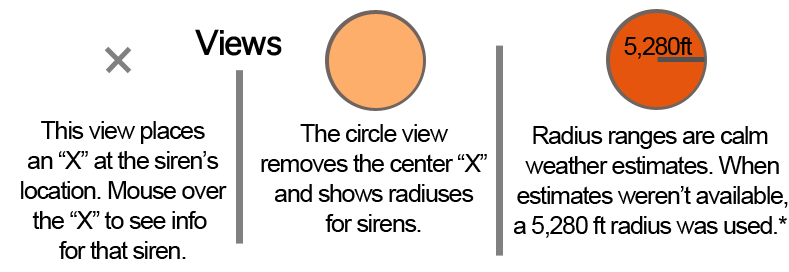
<style>
.page{position:relative;width:789px;height:272px;background:#ffffff}
.page>*{position:absolute;margin:0}
.t1{font:33.3px "Thonburi-Bold";letter-spacing:-0.05em;color:#000000}
.t2{font:25px "ArialMT";letter-spacing:-0.05em;color:#000000}
</style>
<div class="page">
<p class="t1" style="left:195px;top:29px;width:87px;height:27px">Views</p>
<p class="t2" style="left:624px;top:37px;width:69px;height:22px">5,280ft</p>
<p class="t2" style="left:21px;top:121px;width:206px;height:138px;text-align:center">This view places<br>an “X” at the siren’s<br>location. Mouse over<br>the “X” to see info <br>for that siren.</p>
<p class="t2" style="left:261px;top:124px;width:226px;height:108px;text-align:center">The circle view<br>removes the center “X”<br>and shows radiuses<br>for sirens.</p>
<p class="t2" style="left:514px;top:126px;width:274px;height:112px;text-align:center">Radius ranges are calm <br>weather estimates. When<br>estimates weren’t available,<br>a 5,280 ft radius was used.*</p>
</div>
